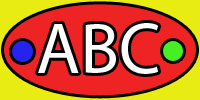
<style>
.page{position:relative;width:200px;height:100px;background:#ee2424}
.page>*{position:absolute;margin:0}
.t1{font:72px "MyriadPro-Regular";color:#ffffff}
</style>
<div class="page">
<p class="t1" style="left:38px;top:23px;width:121px;height:51px">ABC</p>
</div>
